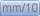
<style>
.page{position:relative;width:40px;height:16px}
.page>*{position:absolute;margin:0}
.t1{font:12px "ArialMT";color:#6e6e6e;scale:0.97 1}
</style>
<div class="page">
<p class="t1" style="left:3px;top:3px;width:35px;height:9px">mm/10</p>
</div>
